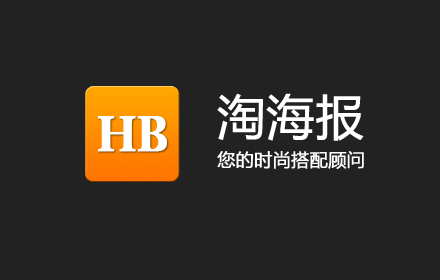
<style>
.page{position:relative;width:440px;height:280px;background:#222222}
.page>*{position:absolute;margin:0}
.t1{font:48px "MicrosoftYaHei";color:#ffffff;font-weight:bold}
.t2{font:18px "MicrosoftYaHei";color:#ffffff;font-weight:bold}
</style>
<div class="page">
<p class="t1" style="left:217px;top:93px;width:147px;height:48px">淘海报</p>
<p class="t2" style="left:217px;top:151px;width:147px;height:18px">您的时尚搭配顾问</p>
</div>
